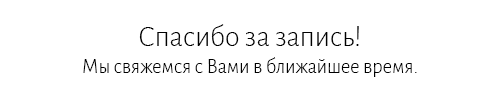
<style>
.page{position:relative;width:500px;height:100px;background:#ffffff}
.page>*{position:absolute;margin:0}
.t1{font:30px "AlegreyaSans-Light";color:#000000}
.t2{font:20.5px "AlegreyaSans-Light";color:#000000}
</style>
<div class="page">
<p class="t1" style="left:139px;top:24px;width:220px;height:22px">Спасибо за запись!</p>
<p class="t2" style="left:83px;top:57px;width:334px;height:20px">Мы свяжемся с Вами в ближайшее время.</p>
</div>
